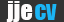
<style>
.page{position:relative;width:64px;height:22px;background:#333333}
.page>*{position:absolute;margin:0}
.t1{font:24px "Impact";color:#fefcfc}
.t2{font:24px "Impact";color:#1bb5f5}
</style>
<div class="page">
<p class="t1" style="left:6px;top:1px;width:27px;height:21px">jje</p>
<p class="t2" style="left:35px;top:4px;width:22px;height:16px">cv</p>
</div>
